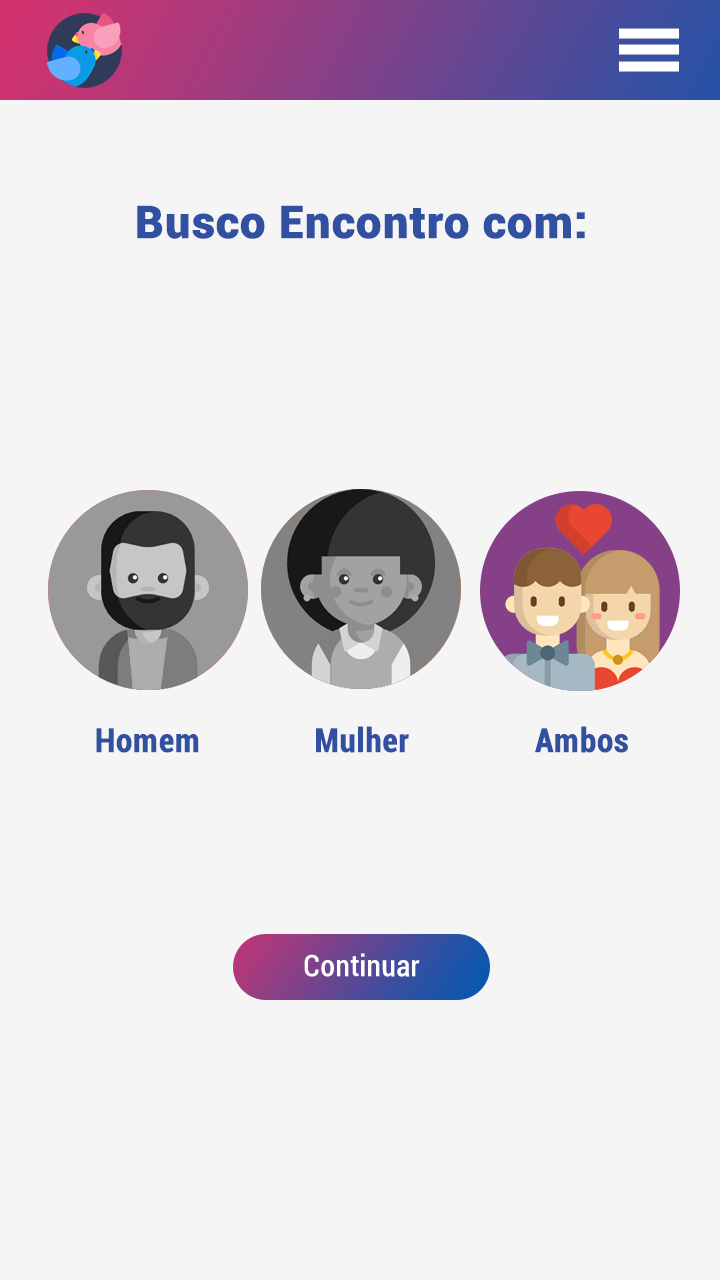
<style>
.page{position:relative;width:720px;height:1280px;background:#f5f5f5}
.page>*{position:absolute;margin:0}
.t1{font:45px "Roboto-Black";color:#3150a2;font-weight:bold}
.t2{font:33px "Roboto-BoldCondensed";color:#3150a1;font-weight:bold}
.t3{font:29px "Roboto-Condensed";color:#ffffff;font-weight:bold}
</style>
<div class="page">
<p class="t1" style="left:137px;top:205px;width:448px;height:34px">Busco Encontro com:</p>
<p class="t2" style="left:316px;top:726px;width:93px;height:27px">Mulher</p>
<p class="t2" style="left:535px;top:726px;width:93px;height:27px">Ambos</p>
<p class="t2" style="left:96px;top:728px;width:103px;height:25px">Homem</p>
<p class="t3" style="left:304px;top:953px;width:116px;height:24px">Continuar</p>
</div>
